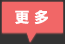
<style>
.page{position:relative;width:65px;height:44px;background:#f16767}
.page>*{position:absolute;margin:0}
.t1{font:14px "MicrosoftYaHei-Bold";letter-spacing:0.4em;color:#fffdfd}
</style>
<div class="page">
<p class="t1" style="left:15px;top:10px;width:33px;height:15px">更多</p>
</div>
